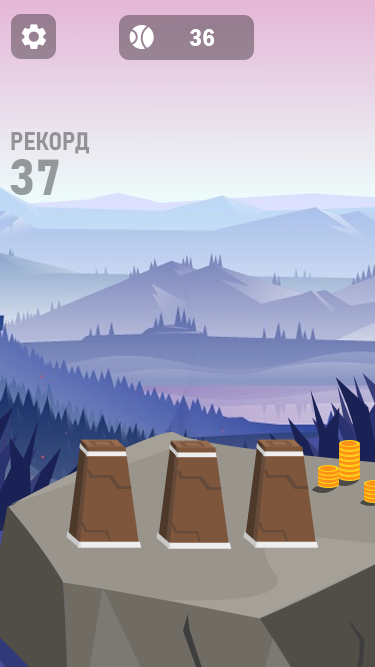
<style>
.page{position:relative;width:375px;height:667px}
.page>*{position:absolute;margin:0}
.t1{font:25px "FranklinGothic-DemiCond";color:#ffffff}
.t2{font:25px "Bahnschrift-BoldSemiCondensed";color:#949297}
.t3{font:50px "Bahnschrift-Bold";color:#94999b}
</style>
<div class="page">
<p class="t1" style="left:189px;top:29px;width:26px;height:17px">36</p>
<p class="t2" style="left:11px;top:132px;width:78px;height:22px">РЕКОРД</p>
<p class="t3" style="left:10px;top:159px;width:49px;height:36px">37</p>
</div>
